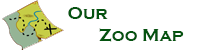
<style>
.page{position:relative;width:200px;height:50px;background:#ffffff}
.page>*{position:absolute;margin:0}
.t1{font:18px "CopperplateGothic-Bold";color:#055310}
</style>
<div class="page">
<p class="t1" style="left:68px;top:7px;width:116px;height:35px">Our <br>       Zoo Map</p>
</div>
